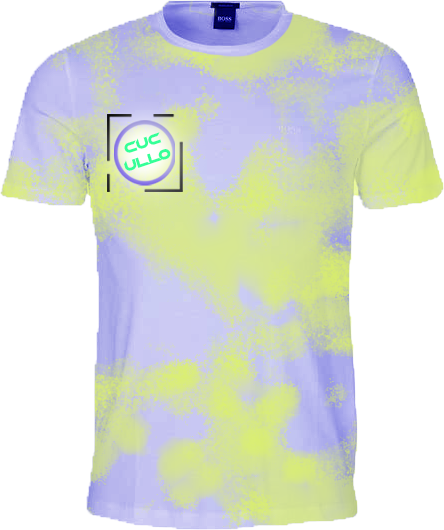
<style>
.page{position:relative;width:444px;height:530px;background:#ffffff}
.page>*{position:absolute;margin:0}
.t1{font:14.6px "Chopsic";color:#33ff98;scale:1.03 1}
</style>
<div class="page">
<p class="t1" style="left:124px;top:132px;width:47px;height:39px;text-align:center;rotate:-19deg">cuc<br>ullo</p>
</div>
